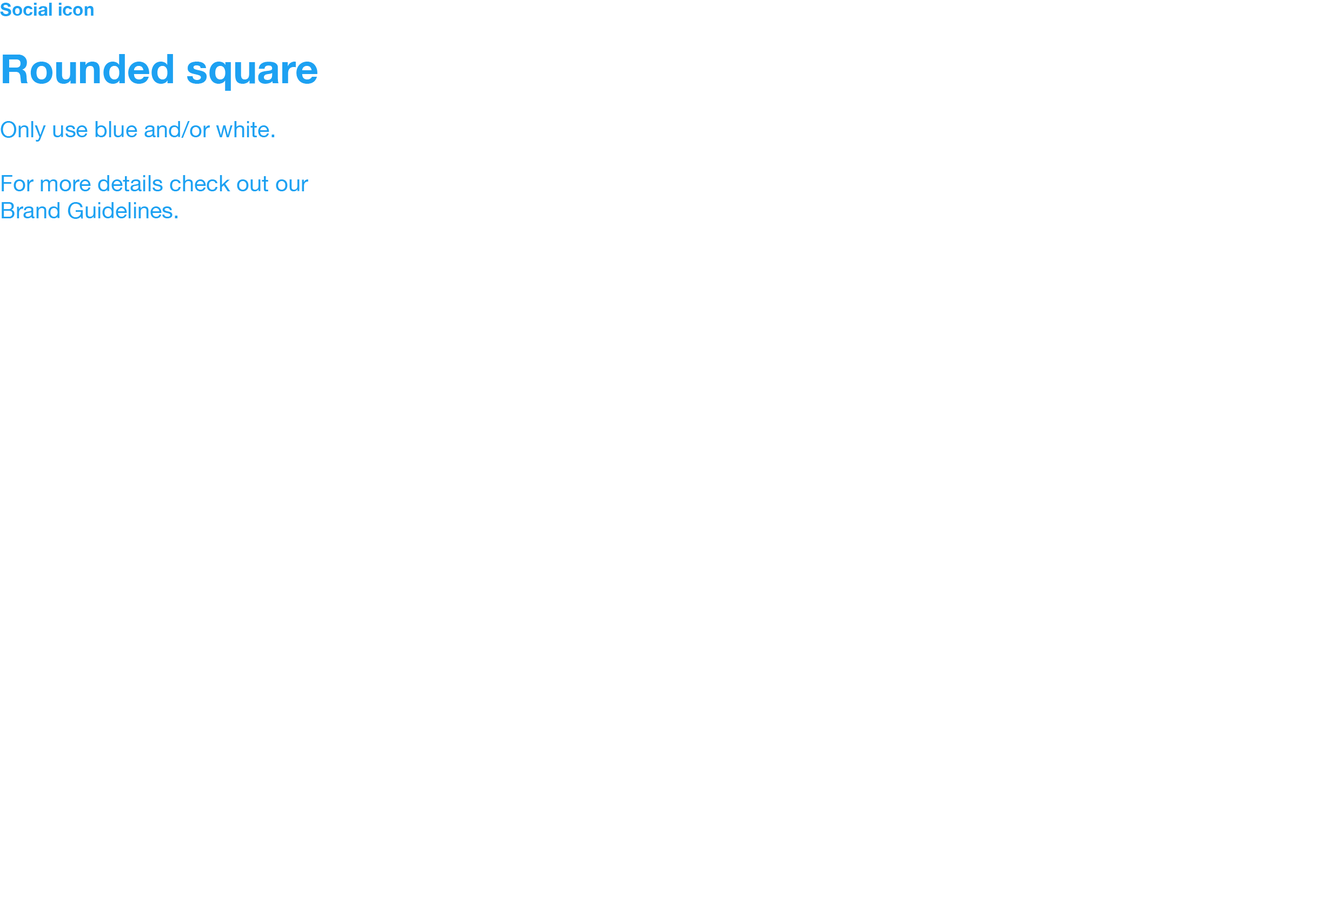
<style>
.page{position:relative;width:1320px;height:903px;background:#ffffff}
.page>*{position:absolute;margin:0}
.t1{font:22.5px "HelveticaNeue";color:#1da1f2}
.t2{font:18px/40.6px "HelveticaNeue-Bold";color:#1da1f2}
.t3{font:40.6px/40.6px "HelveticaNeue-Bold";color:#1da1f2}
</style>
<div class="page">
<p class="t1" style="left:0px;top:3px;width:317px;height:216px"><span class="t2">Social icon<br><br></span><span class="t3">Rounded square<br></span><br>Only use blue and/or white.<br><br>For more details check out our<br>Brand Guidelines.</p>
</div>
